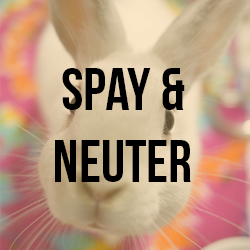
<style>
.page{position:relative;width:250px;height:250px}
.page>*{position:absolute;margin:0}
.t1{font:60px "BebasNeue";color:#000000}
</style>
<div class="page">
<p class="t1" style="left:55px;top:68px;width:136px;height:114px;text-align:center">spay &amp;<br>neuter</p>
</div>
